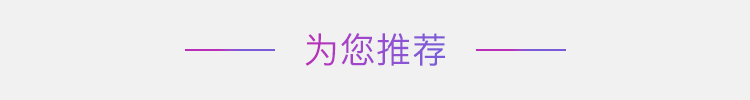
<style>
.page{position:relative;width:750px;height:100px;background:#f1f1f1}
.page>*{position:absolute;margin:0}
.t1{font:35px "PingFang-SC-Regular";font-weight:bold}
</style>
<div class="page">
<p class="t1" style="left:305px;top:33px;width:140px;height:33px">为您推荐</p>
</div>
